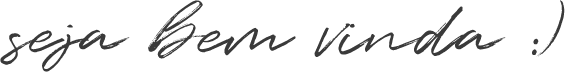
<style>
.page{position:relative;width:565px;height:72px;background:#ffffff}
.page>*{position:absolute;margin:0}
.t1{font:73px "Quentin";color:#3a3a3a}
</style>
<div class="page">
<p class="t1" style="left:0px;top:0px;width:565px;height:72px">seja bem vinda :)</p>
</div>
